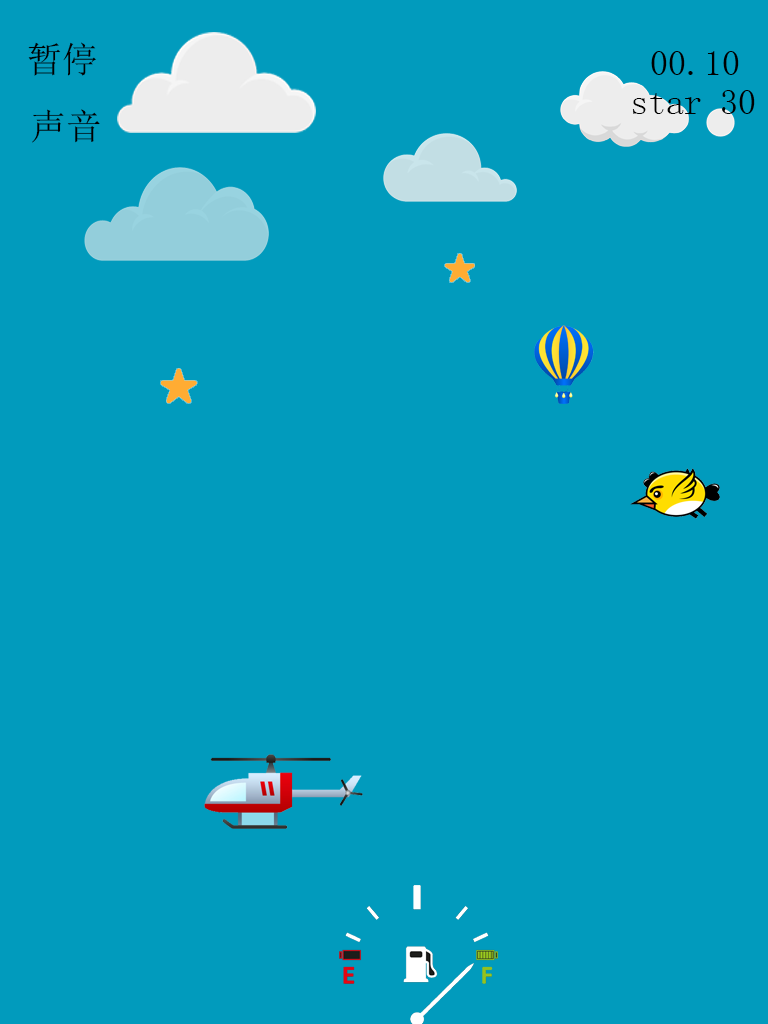
<style>
.page{position:relative;width:768px;height:1024px;background:#019bbd}
.page>*{position:absolute;margin:0}
.t1{font:36px "SimSun";color:#000000}
</style>
<div class="page">
<p class="t1" style="left:28px;top:42px;width:68px;height:34px">暂停</p>
<p class="t1" style="left:651px;top:51px;width:88px;height:24px">00.10</p>
<p class="t1" style="left:632px;top:90px;width:123px;height:24px">star 30</p>
<p class="t1" style="left:32px;top:109px;width:68px;height:34px">声音</p>
</div>
